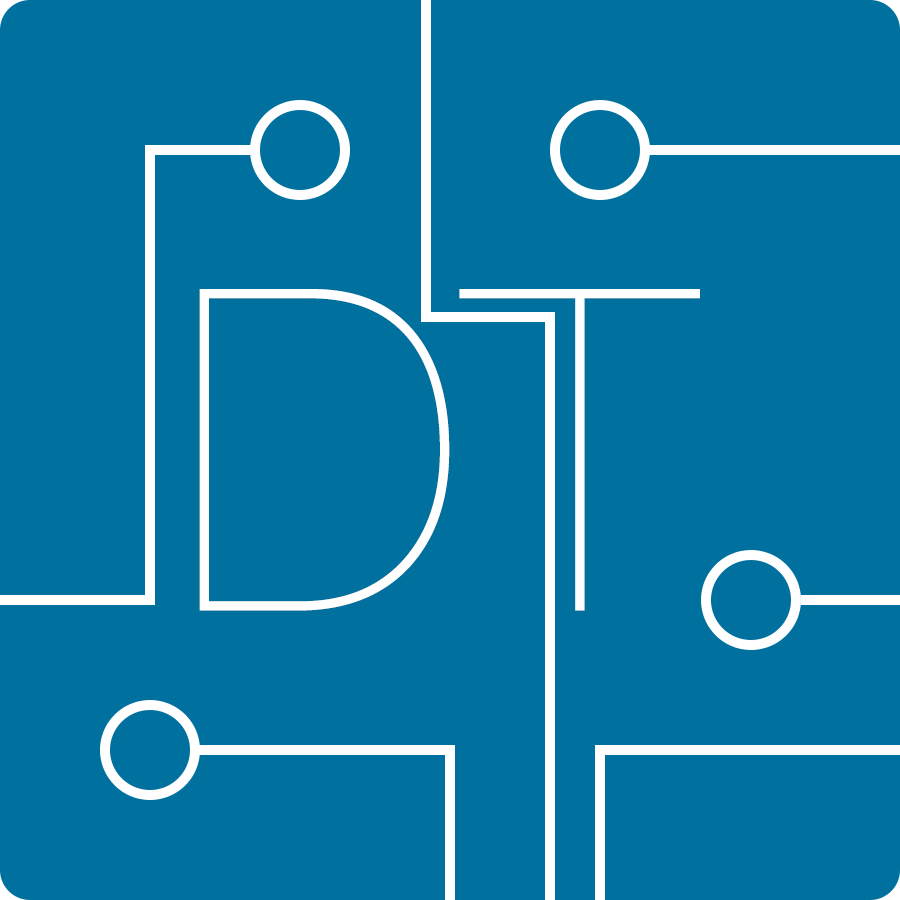
<style>
.page{position:relative;width:900px;height:900px;background:#00709e}
.page>*{position:absolute;margin:0}
.t1{font:450px "HelveticaUltraLight";color:#ffffff}
</style>
<div class="page">
<p class="t1" style="left:199px;top:289px;width:501px;height:322px">DT</p>
</div>
